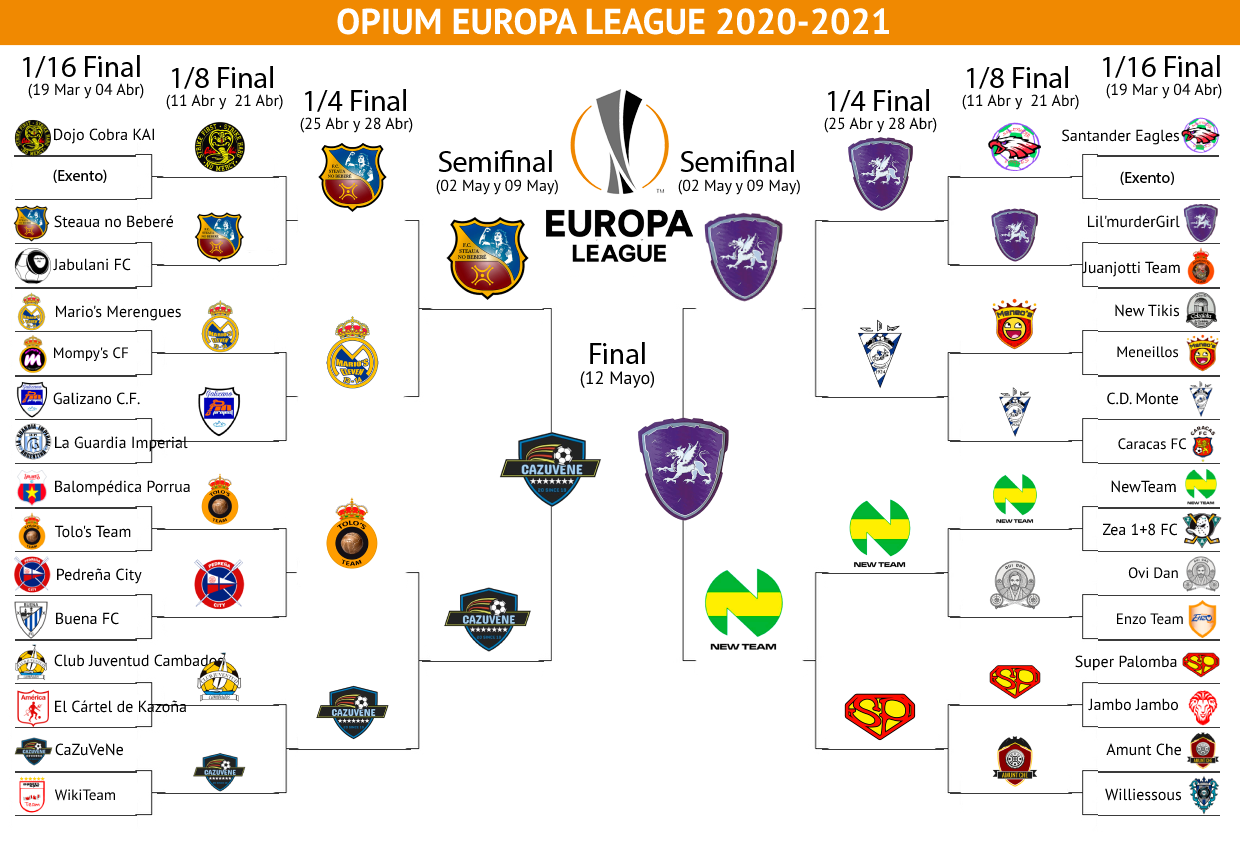
<style>
.page{position:relative;width:1240px;height:850px;background:#ffffff}
.page>*{position:absolute;margin:0}
.t1{font:36px "MyriadPro-Bold";color:#ffffff}
.t2{font:30px "MyriadPro-Regular";color:#000000}
.t3{font:16px "MyriadPro-Regular";color:#000000}
.t4{font:15px "MyriadPro-Regular";color:#000000}
.t5{font:18px "MyriadPro-Regular";color:#000000}
</style>
<div class="page">
<p class="t1" style="left:337px;top:8px;width:552px;height:27px">OPIUM EUROPA LEAGUE 2020-2021</p>
<p class="t2" style="left:23px;top:55px;width:117px;height:23px">1/16 Final</p>
<p class="t2" style="left:1103px;top:55px;width:117px;height:23px">1/16 Final</p>
<p class="t2" style="left:172px;top:66px;width:101px;height:23px">1/8 Final</p>
<p class="t2" style="left:967px;top:66px;width:101px;height:23px">1/8 Final</p>
<p class="t3" style="left:28px;top:83px;width:116px;height:16px">(19 Mar y 04 Abr)</p>
<p class="t2" style="left:305px;top:89px;width:101px;height:23px">1/4 Final</p>
<p class="t2" style="left:828px;top:89px;width:101px;height:23px">1/4 Final</p>
<p class="t3" style="left:1106px;top:83px;width:116px;height:16px">(19 Mar y 04 Abr)</p>
<p class="t3" style="left:166px;top:94px;width:117px;height:16px">(11 Abr y  21 Abr)</p>
<p class="t3" style="left:962px;top:94px;width:117px;height:16px">(11 Abr y  21 Abr)</p>
<p class="t3" style="left:300px;top:117px;width:113px;height:16px">(25 Abr y 28 Abr)</p>
<p class="t3" style="left:824px;top:117px;width:113px;height:16px">(25 Abr y 28 Abr)</p>
<p class="t3" style="left:54px;top:128px;width:100px;height:16px">Dojo Cobra KAI</p>
<p class="t3" style="left:1062px;top:129px;width:118px;height:16px">Santander Eagles</p>
<p class="t2" style="left:438px;top:150px;width:114px;height:22px">Semifinal</p>
<p class="t2" style="left:680px;top:150px;width:114px;height:22px">Semifinal</p>
<p class="t3" style="left:53px;top:169px;width:54px;height:14px">(Exento)</p>
<p class="t3" style="left:1120px;top:171px;width:54px;height:14px">(Exento)</p>
<p class="t3" style="left:436px;top:179px;width:122px;height:16px">(02 May y 09 May)</p>
<p class="t3" style="left:678px;top:179px;width:122px;height:16px">(02 May y 09 May)</p>
<p class="t3" style="left:54px;top:215px;width:120px;height:13px">Steaua no Beberé</p>
<p class="t3" style="left:1087px;top:215px;width:93px;height:13px">Lil'murderGirl</p>
<p class="t3" style="left:53px;top:258px;width:78px;height:13px">Jabulani FC</p>
<p class="t3" style="left:1082px;top:261px;width:98px;height:16px">Juanjotti Team</p>
<p class="t3" style="left:56px;top:305px;width:125px;height:16px">Mario's Merengues</p>
<p class="t3" style="left:1115px;top:304px;width:65px;height:13px">New Tikis</p>
<p class="t2" style="left:590px;top:342px;width:55px;height:22px">Final</p>
<p class="t4" style="left:54px;top:347px;width:74px;height:15px">Mompy's CF</p>
<p class="t4" style="left:1117px;top:346px;width:62px;height:12px">Meneillos</p>
<p class="t5" style="left:580px;top:371px;width:75px;height:17px">(12 Mayo)</p>
<p class="t3" style="left:53px;top:392px;width:87px;height:13px">Galizano C.F.</p>
<p class="t3" style="left:1107px;top:392px;width:71px;height:13px">C.D. Monte</p>
<p class="t3" style="left:55px;top:436px;width:133px;height:16px">La Guardia Imperial</p>
<p class="t4" style="left:1118px;top:438px;width:69px;height:12px">Caracas FC</p>
<p class="t3" style="left:55px;top:480px;width:135px;height:16px">Balompédica Porrua</p>
<p class="t3" style="left:1111px;top:480px;width:65px;height:13px">NewTeam</p>
<p class="t3" style="left:55px;top:525px;width:76px;height:13px">Tolo's Team</p>
<p class="t3" style="left:1102px;top:523px;width:76px;height:13px">Zea 1+8 FC</p>
<p class="t3" style="left:57px;top:568px;width:85px;height:16px">Pedreña City</p>
<p class="t4" style="left:1128px;top:567px;width:50px;height:12px">Ovi Dan</p>
<p class="t3" style="left:56px;top:612px;width:63px;height:13px">Buena FC</p>
<p class="t4" style="left:1117px;top:613px;width:66px;height:12px">Enzo Team</p>
<p class="t3" style="left:54px;top:654px;width:170px;height:13px">Club Juventud Cambados</p>
<p class="t3" style="left:1075px;top:655px;width:102px;height:16px">Super Palomba</p>
<p class="t3" style="left:55px;top:700px;width:131px;height:13px">El Cártel de Kazoña</p>
<p class="t3" style="left:1088px;top:698px;width:90px;height:13px">Jambo Jambo</p>
<p class="t3" style="left:55px;top:743px;width:68px;height:13px">CaZuVeNe</p>
<p class="t3" style="left:1106px;top:743px;width:75px;height:13px">Amunt Che</p>
<p class="t4" style="left:54px;top:789px;width:62px;height:12px">WikiTeam</p>
<p class="t3" style="left:1105px;top:788px;width:77px;height:13px">Williessous</p>
</div>
